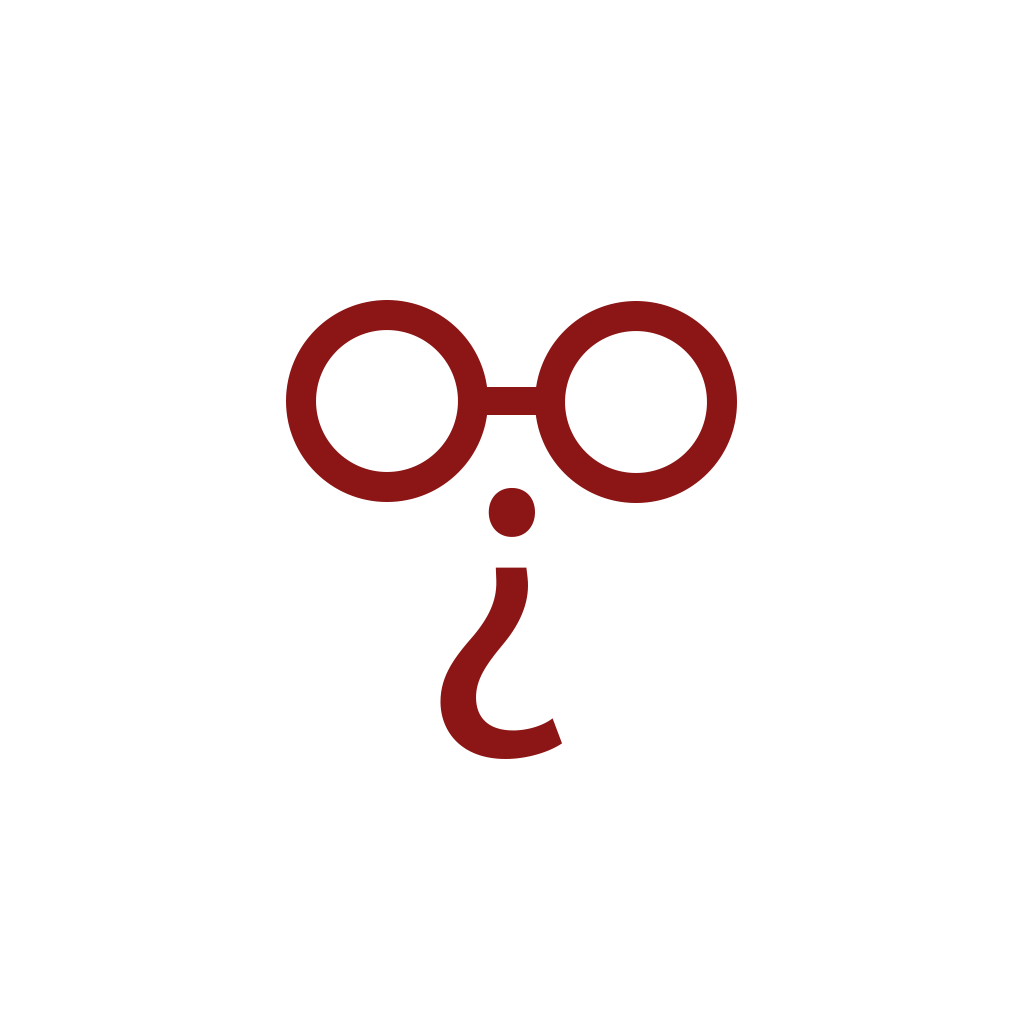
<style>
.page{position:relative;width:1024px;height:1024px;background:#ffffff}
.page>*{position:absolute;margin:0}
.t1{font:391.1px "MyriadPro-Regular";color:#8c1515}
</style>
<div class="page">
<p class="t1" style="left:440px;top:487px;width:122px;height:272px">¿</p>
</div>
